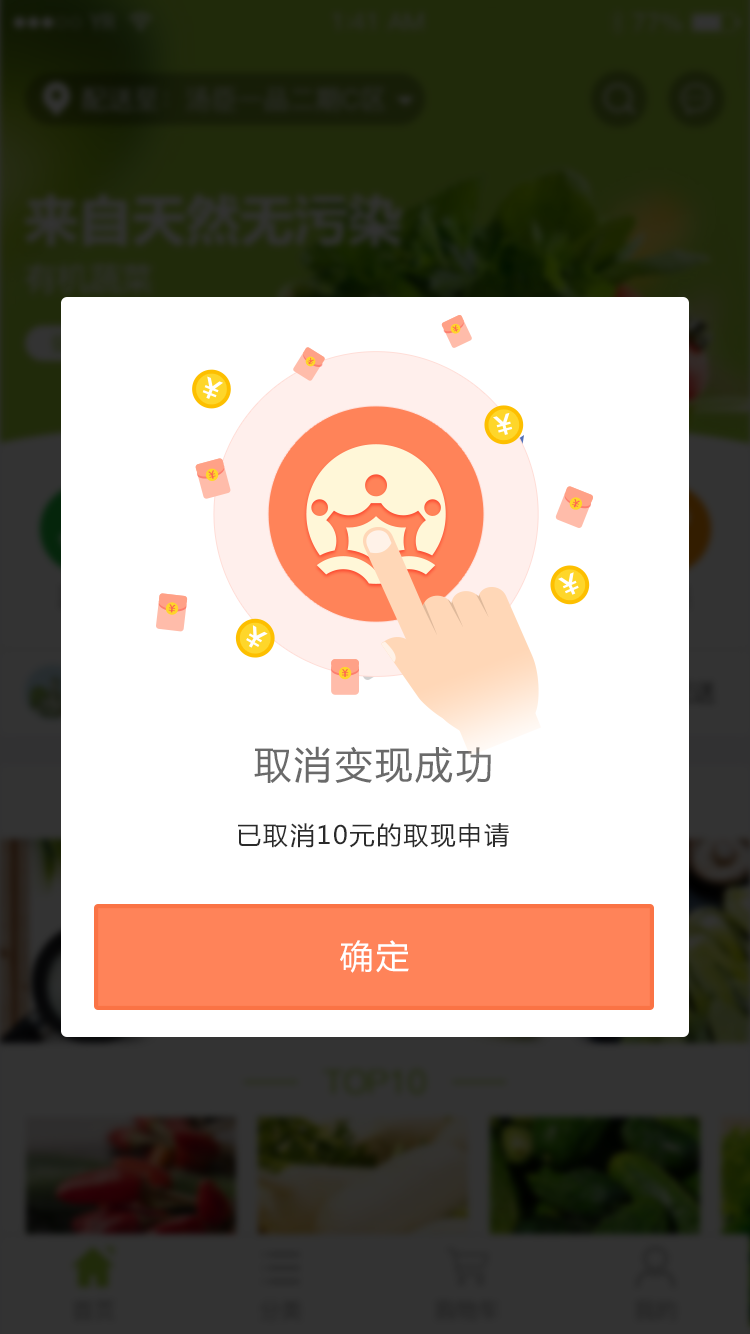
<style>
.page{position:relative;width:750px;height:1334px;background:#ffffff}
.page>*{position:absolute;margin:0}
.t1{font:37.5px "MicrosoftYaHei";letter-spacing:0.075em;color:#6a6a6a}
.t2{font:25px "MicrosoftYaHei";letter-spacing:0.075em;color:#2a2a2a}
.t3{font:33.3px "MicrosoftYaHei";letter-spacing:0.075em;color:#ffffff}
</style>
<div class="page">
<p class="t1" style="left:254px;top:746px;width:237px;height:37px">取消变现成功</p>
<p class="t2" style="left:238px;top:823px;width:271px;height:25px">已取消10元的取现申请</p>
<p class="t3" style="left:340px;top:940px;width:69px;height:33px">确定</p>
</div>
